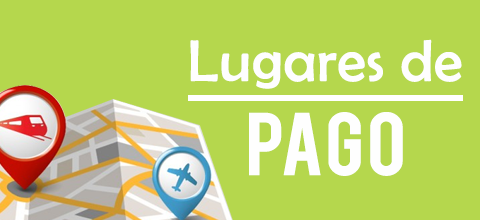
<style>
.page{position:relative;width:480px;height:220px;background:#b5d74d}
.page>*{position:absolute;margin:0}
.t1{font:59.4px "BerlinSansFB-Reg";letter-spacing:0.015em;color:#fefefe}
.t2{font:69.9px "Bebas";letter-spacing:0.015em;color:#fefefe;scale:1.08 1}
</style>
<div class="page">
<p class="t1" style="left:190px;top:39px;width:272px;height:50px">Lugares de</p>
<p class="t2" style="left:249px;top:112px;width:154px;height:64px">PAGO</p>
</div>
